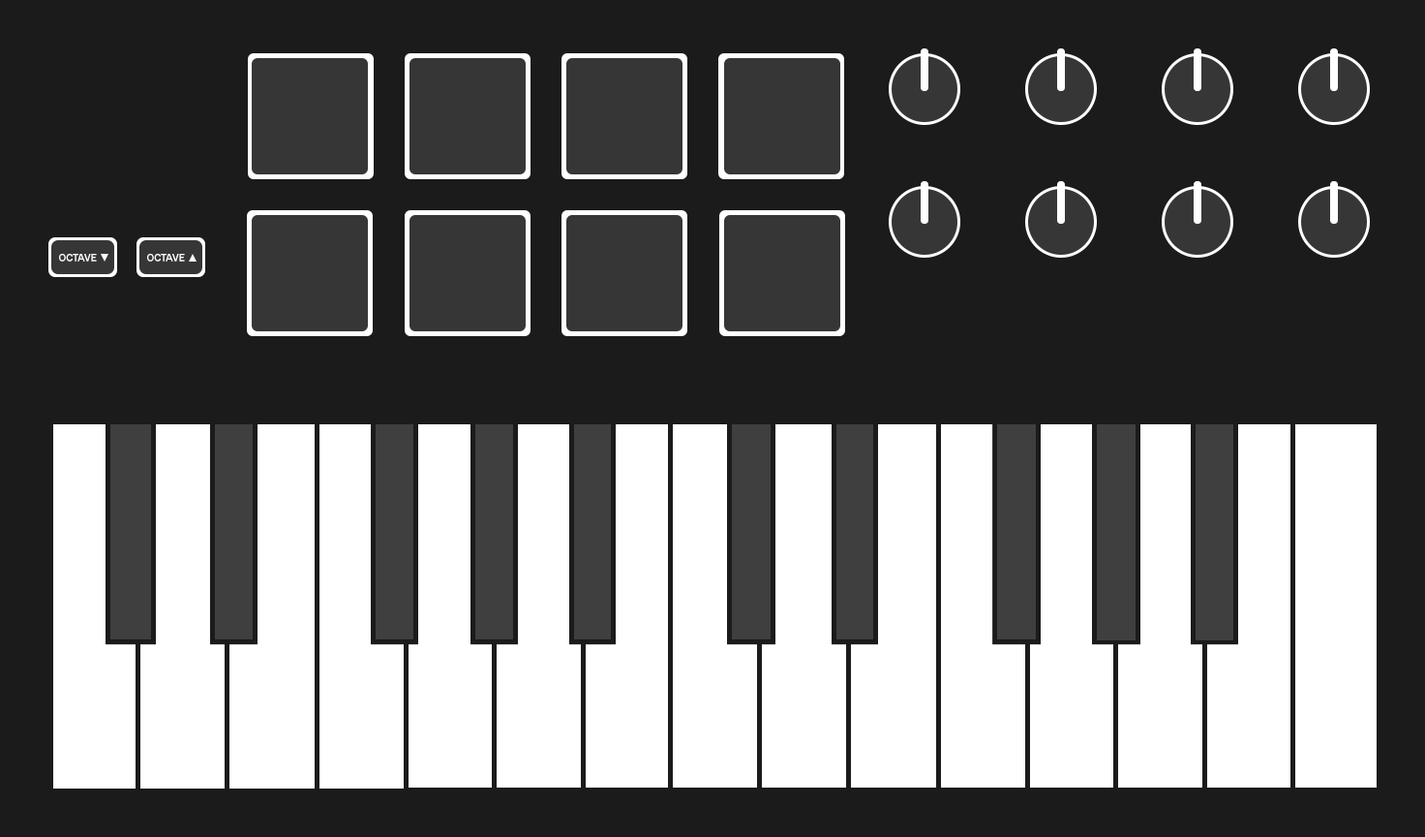
<style>
.page{position:relative;width:1425px;height:837px;background:#1b1b1b}
.page>*{position:absolute;margin:0}
.t1{font:11.2px "FranklinGothic-Medium";color:#ffffff;scale:1.04 1}
</style>
<div class="page">
<p class="t1" style="left:59px;top:254px;width:38px;height:7px">OCTAVE</p>
<p class="t1" style="left:147px;top:254px;width:38px;height:7px">OCTAVE</p>
</div>
